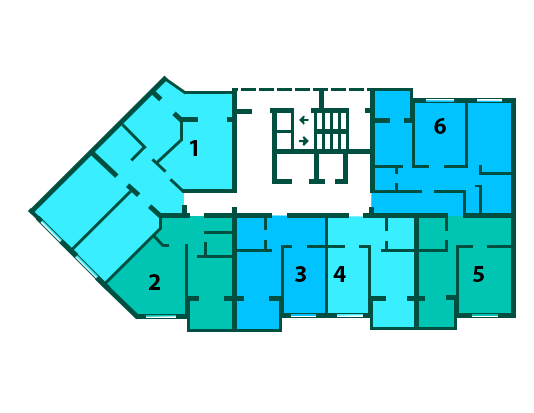
<style>
.page{position:relative;width:534px;height:413px;background:#ffffff}
.page>*{position:absolute;margin:0}
.t1{font:24px "MyriadPro-Bold";color:#000000;text-transform:uppercase}
</style>
<div class="page">
<p class="t1" style="left:434px;top:118px;width:12px;height:16px">6</p>
<p class="t1" style="left:190px;top:140px;width:7px;height:16px">1</p>
<p class="t1" style="left:295px;top:266px;width:11px;height:16px">3</p>
<p class="t1" style="left:333px;top:266px;width:13px;height:16px">4</p>
<p class="t1" style="left:473px;top:266px;width:11px;height:16px">5</p>
<p class="t1" style="left:149px;top:274px;width:11px;height:16px">2</p>
</div>
